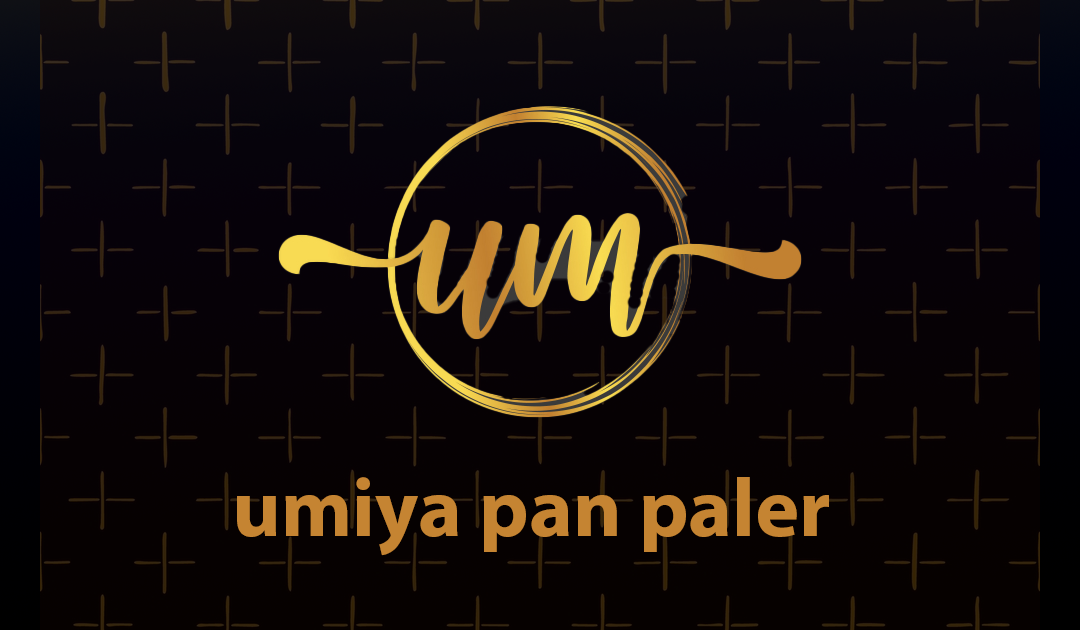
<style>
.page{position:relative;width:1080px;height:630px}
.page>*{position:absolute;margin:0}
.t1{font:83.3px "MyriadPro-Bold";color:#c58432}
</style>
<div class="page">
<p class="t1" style="left:237px;top:477px;width:592px;height:79px">umiya pan paler</p>
</div>
